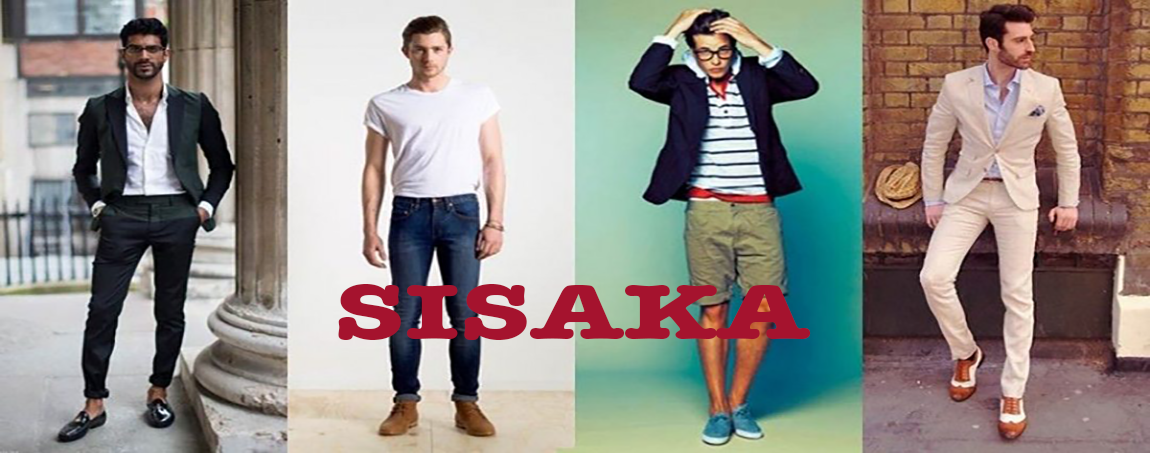
<style>
.page{position:relative;width:1150px;height:453px}
.page>*{position:absolute;margin:0}
.t1{font:80px "AmericanTypewriter-Bold";color:#a5132e;scale:1.44 1}
</style>
<div class="page">
<p class="t1" style="left:338px;top:284px;width:473px;height:56px">SISAKA</p>
</div>
